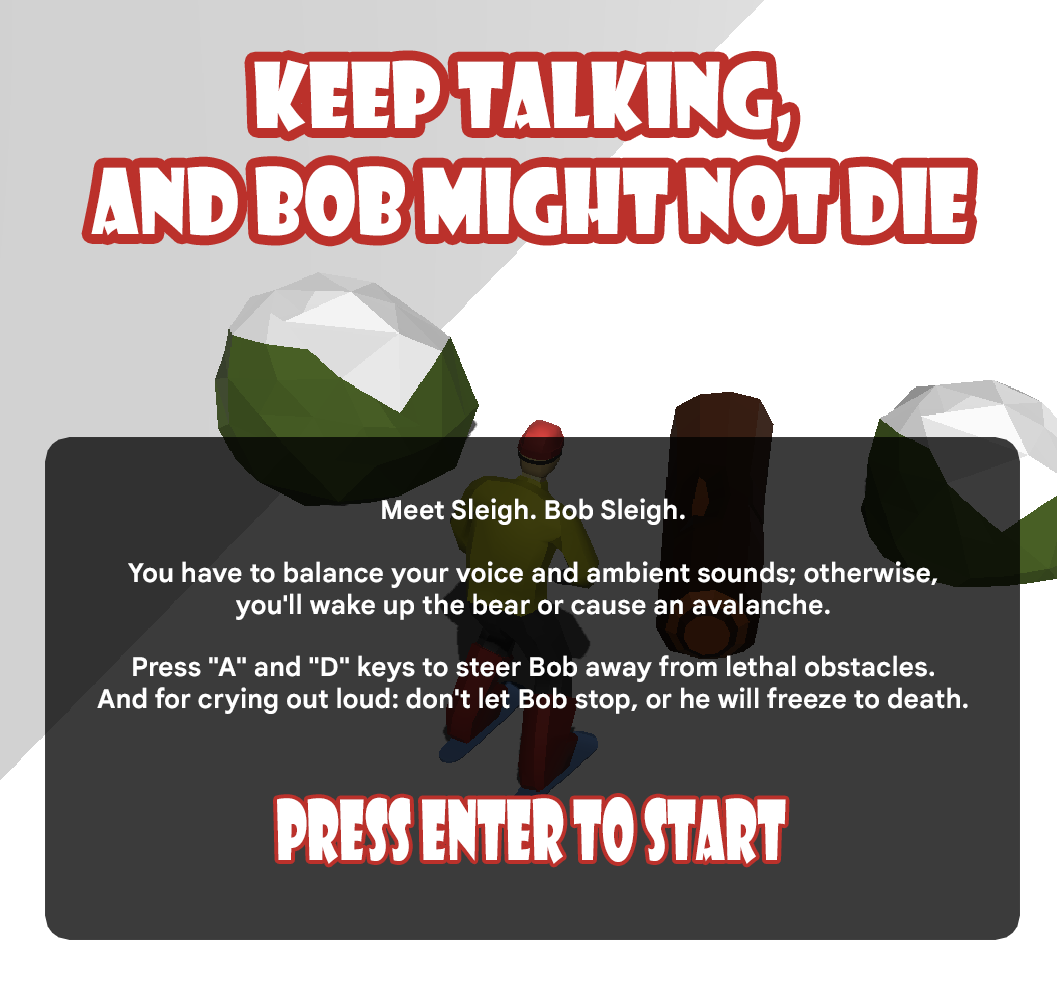
<style>
.page{position:relative;width:1057px;height:989px;background:#ffffff}
.page>*{position:absolute;margin:0}
.t1{font:88.2px "ShowcardGothic-Reg";color:#ffffff;scale:0.85 1}
.t2{font:26.2px "GoogleSansText-Bold";color:#ffffff}
.t3{font:80.7px "ShowcardGothic-Reg";color:#ffffff;scale:0.58 1}
</style>
<div class="page">
<p class="t1" style="left:91px;top:60px;width:877px;height:177px;text-align:center">Keep talking, <br>and Bob might not die</p>
<p class="t2" style="left:97px;top:498px;width:871px;height:216px;text-align:center">Meet Sleigh. Bob Sleigh. <br><br>You have to balance your voice and ambient sounds; otherwise, <br>you'll wake up the bear or cause an avalanche. <br><br>Press "A" and "D" keys to steer Bob away from lethal obstacles. <br>And for crying out loud: don't let Bob stop, or he will freeze to death.</p>
<p class="t3" style="left:277px;top:797px;width:509px;height:67px">press ENTER to start</p>
</div>
